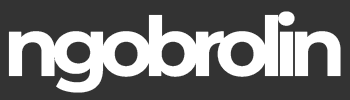
<style>
.page{position:relative;width:350px;height:100px;background:#333333}
.page>*{position:absolute;margin:0}
.t1{font:82.1px "MontserratRoman-Bold";letter-spacing:-0.12em;color:#ffffff}
</style>
<div class="page">
<p class="t1" style="left:8px;top:11px;width:333px;height:82px">ngobrolin</p>
</div>
